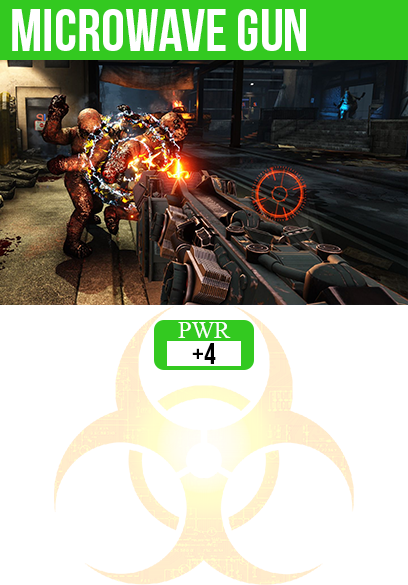
<style>
.page{position:relative;width:408px;height:585px;background:#ffffff}
.page>*{position:absolute;margin:0}
.t1{font:60px "BebasNeue";color:#ffffff}
.t2{font:24px "TimesNewRomanPSMT";color:#ffffff}
.t3{font:30px "BebasNeue";color:#000000}
</style>
<div class="page">
<p class="t1" style="left:12px;top:9px;width:294px;height:42px">microwave gun</p>
<p class="t2" style="left:178px;top:322px;width:53px;height:16px">PWR</p>
<p class="t3" style="left:192px;top:343px;width:24px;height:21px">+4</p>
</div>
